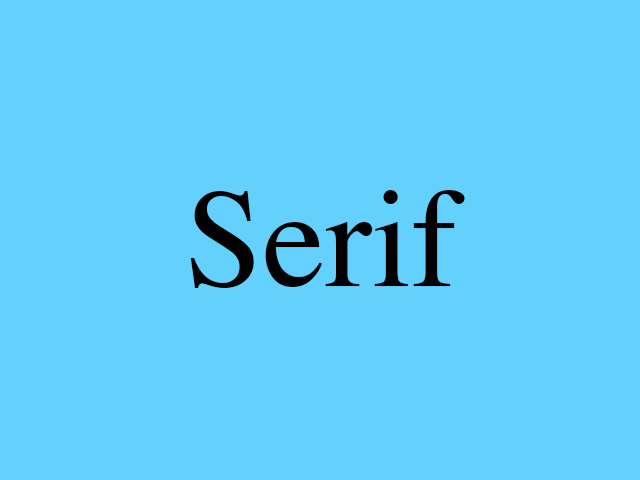
<style>
.page{position:relative;width:640px;height:480px;background:#64d0fd}
.page>*{position:absolute;margin:0}
.t1{font:140px "Times-Roman";color:#000000}
</style>
<div class="page">
<p class="t1" style="left:190px;top:190px;width:275px;height:98px">Serif</p>
</div>
